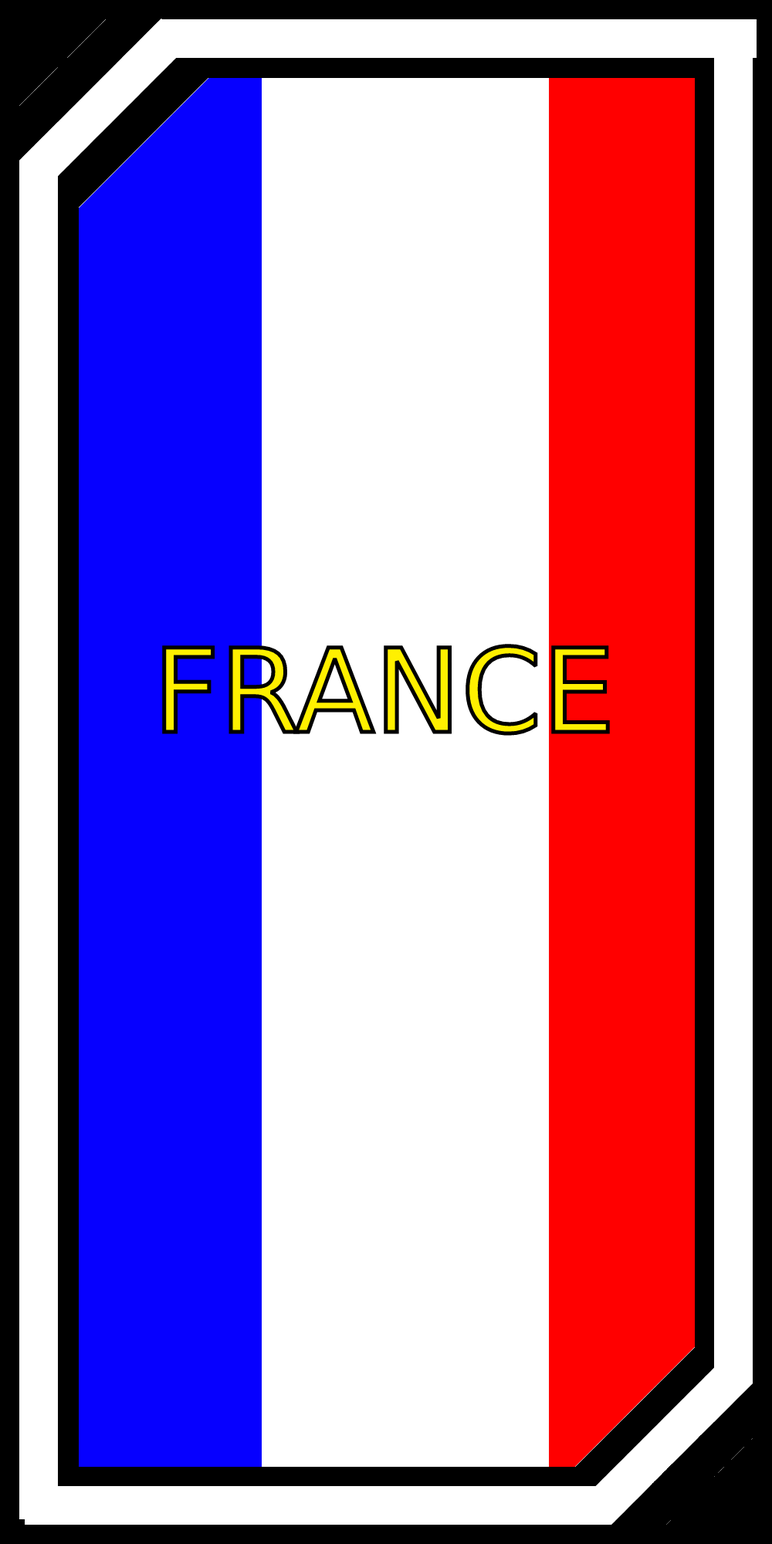
<style>
.page{position:relative;width:772px;height:1544px;background:#ffffff}
.page>*{position:absolute;margin:0}
.t1{font:115.8px "DejaVuSans"}
</style>
<div class="page">
<p class="t1" style="left:162px;top:644px;width:448px;height:92px">FRANCE</p>
</div>
